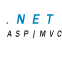
<style>
.page{position:relative;width:62px;height:66px;background:#ffffff}
.page>*{position:absolute;margin:0}
.t1{font:14.3px "FranklinGothic-Medium";letter-spacing:0.475em;color:#0081bf;text-transform:uppercase;font-style:italic}
.t2{font:9.2px "FranklinGothic-Medium";letter-spacing:0.475em;color:#0e0f0f;font-style:italic;scale:0.84 1}
</style>
<div class="page">
<p class="t1" style="left:6px;top:14px;width:48px;height:10px">.NET</p>
<p class="t2" style="left:7px;top:30px;width:55px;height:9px">ASP|MVC</p>
</div>
